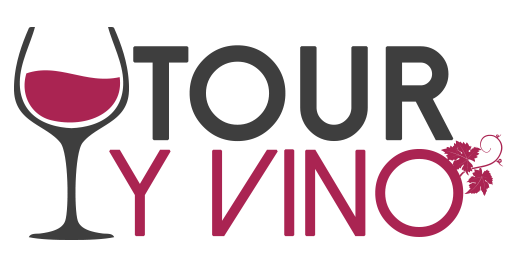
<style>
.page{position:relative;width:526px;height:273px;background:#ffffff}
.page>*{position:absolute;margin:0}
.t1{font:130.8px "DolceVitaHeavy-Bold";letter-spacing:0.02em;color:#3e3e3e;text-transform:uppercase;font-weight:bold}
.t2{font:120.3px "DolceVita";letter-spacing:0.02em;color:#aa2452;text-transform:uppercase;font-weight:bold}
</style>
<div class="page">
<p class="t1" style="left:133px;top:45px;width:321px;height:97px">Tour</p>
<p class="t2" style="left:109px;top:149px;width:355px;height:88px">y Vino</p>
</div>
